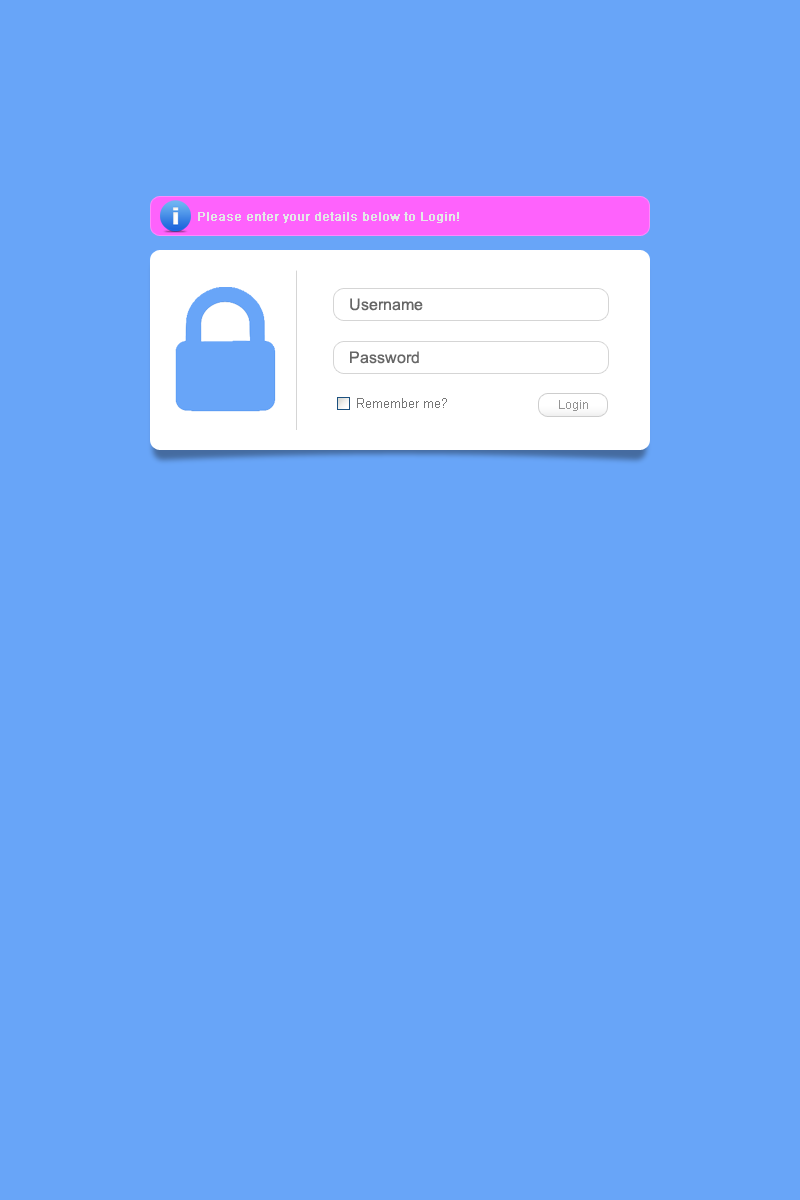
<style>
.page{position:relative;width:800px;height:1200px;background:#68a5f8}
.page>*{position:absolute;margin:0}
.t1{font:12px "ArialMT";color:#e5e7e9;font-weight:bold}
.t2{font:16px "ArialMT";color:#666666}
.t3{font:12px "ArialMT";color:#959494}
</style>
<div class="page">
<p class="t1" style="left:198px;top:212px;width:261px;height:11px">Please enter your details below to Login!</p>
<p class="t2" style="left:350px;top:298px;width:73px;height:13px">Username</p>
<p class="t2" style="left:350px;top:351px;width:69px;height:13px">Password</p>
<p class="t3" style="left:559px;top:400px;width:29px;height:11px">Login</p>
</div>
